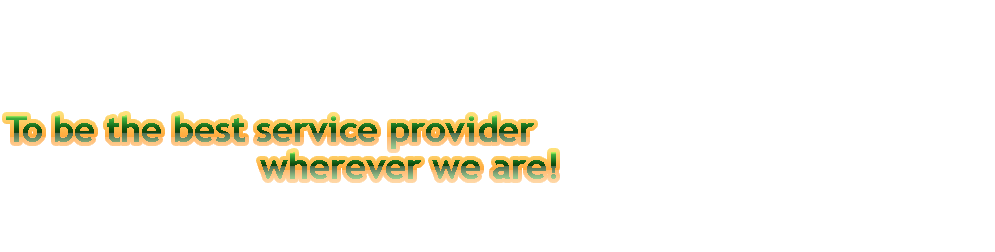
<style>
.page{position:relative;width:995px;height:252px;background:#ffffff}
.page>*{position:absolute;margin:0}
.t1{font:36px "TrebuchetMS-Bold"}
</style>
<div class="page">
<p class="t1" style="left:6px;top:115px;width:528px;height:34px">To be the best service provider</p>
<p class="t1" style="left:260px;top:152px;width:296px;height:27px">wherever we are!</p>
</div>
